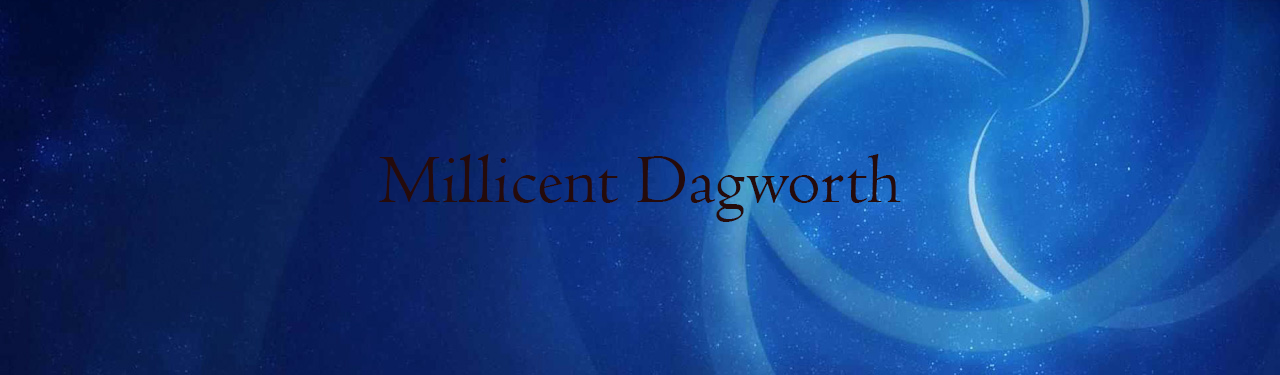
<style>
.page{position:relative;width:1280px;height:375px}
.page>*{position:absolute;margin:0}
.t1{font:72px "Centaur";color:#250b0b}
</style>
<div class="page">
<p class="t1" style="left:379px;top:154px;width:522px;height:68px">Millicent Dagworth</p>
</div>
